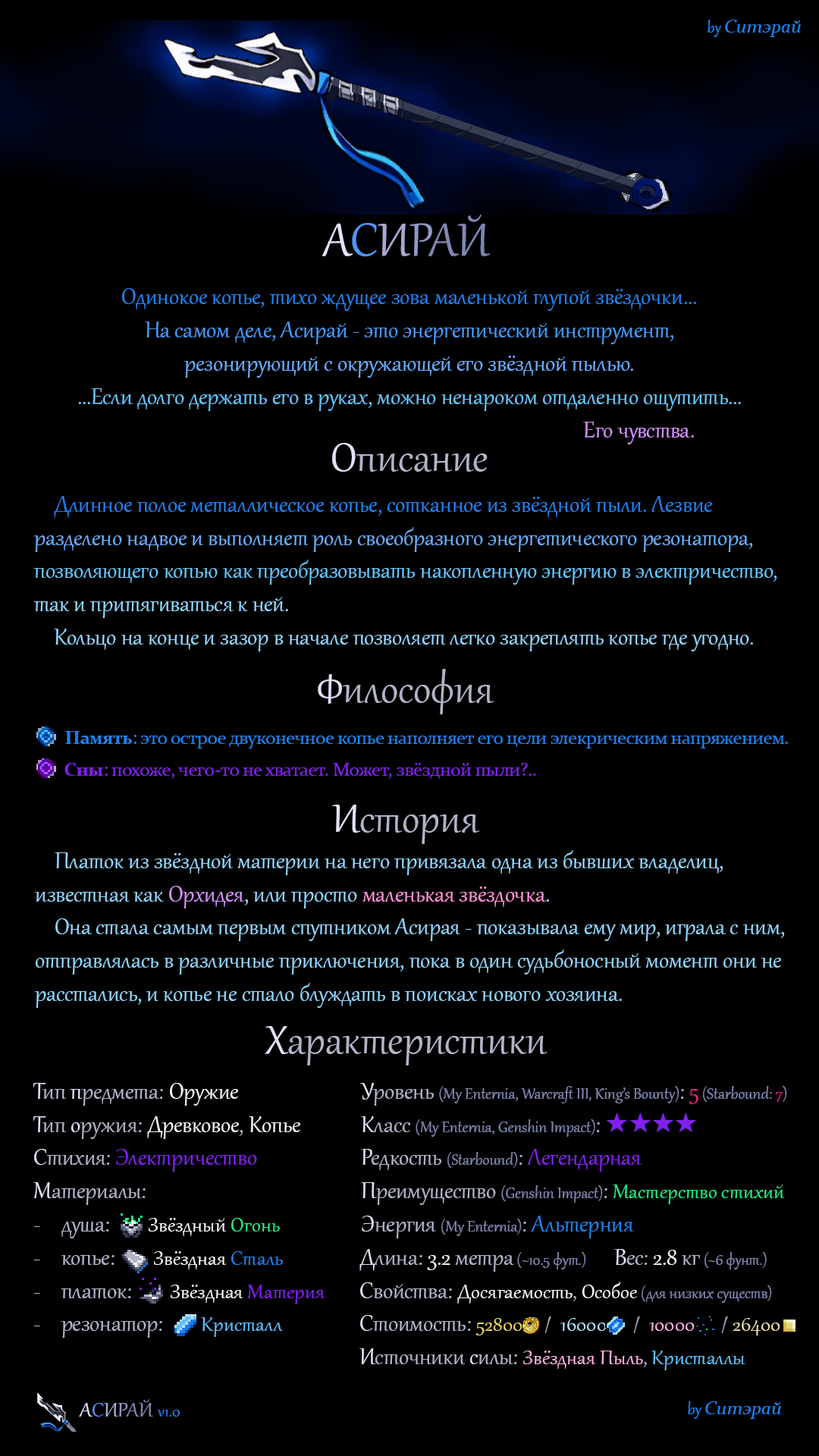
<style>
.page{position:relative;width:819px;height:1456px;background:#000000}
.page>*{position:absolute;margin:0}
.t1{font:19px "Constantia-Italic";color:#2080f0}
.t2{font:19px "Gabriola";color:#2080f0}
.t3{font:56.9px "Gabriola";color:#7e86b0}
.t4{font:56.9px "Gabriola";color:#e1e2fa}
.t5{font:56.9px "Gabriola";color:#5095fd}
.t6{font:56.9px "Gabriola";color:#a7a9d0}
.t7{font:56.9px "Gabriola";color:#9099c7}
.t8{font:27.7px "Gabriola";color:#65c6ff}
.t9{font:27.7px "Gabriola";color:#2080f0}
.t10{font:27.7px "Gabriola";color:#469afb}
.t11{font:27.7px "Gabriola";color:#69aefe}
.t12{font:27.7px "Gabriola";color:#d691ff}
.t13{font:49.5px "Gabriola";color:#b0b4c8}
.t14{font:49.5px "Gabriola";color:#e1e2fa}
.t15{font:27.7px "Gabriola";color:#91d6ff}
.t16{font:19px "Constantia";letter-spacing:-0.025em;color:#2080f0}
.t17{font:19px "Constantia-Bold";letter-spacing:-0.025em;color:#2080f0}
.t18{font:19px "Constantia";letter-spacing:-0.025em;color:#8020f0}
.t19{font:19px "Constantia-Bold";letter-spacing:-0.025em;color:#8020f0}
.t20{font:27.7px "Gabriola";color:#ff91d6}
.t21{font:27.7px "Gabriola";color:#b0b4c8}
.t22{font:27.7px "Gabriola";color:#e1e2fa}
.t23{font:27.7px "Gabriola";color:#f6f6f6}
.t24{font:27.7px "Gabriola";color:#8020f0}
.t25{font:25.3px "Gabriola";color:#f6f6f6}
.t26{font:25.3px "Gabriola";color:#20f080}
.t27{font:25.3px "Gabriola";color:#2080f0}
.t28{font:25.3px "Gabriola";color:#8020f0}
.t29{font:25.3px "Gabriola";color:#60c0fc}
.t30{font:19px "Gabriola";color:#7e86b0}
.t31{font:27.7px "Gabriola";color:#f02080}
.t32{font:19px "Gabriola";color:#f02080}
.t33{font:27.7px "SegoeUISymbol";color:#8020f0}
.t34{font:25.3px "Gabriola";color:#b0b4c8}
.t35{font:25.3px "Gabriola";color:#e7d55c}
.t36{font:25.3px "Gabriola";color:#b0e0fc}
.t37{font:25.3px "Gabriola";color:#fcb0e0}
.t38{font:25.3px "Gabriola";color:#eade9d}
.t39{font:20.3px "Gabriola";color:#2080f0}
.t40{font:25.3px "Gabriola";color:#e1e2fa}
.t41{font:25.3px "Gabriola";color:#5095fd}
.t42{font:25.3px "Gabriola";color:#a7a9d0}
.t43{font:25.3px "Gabriola";color:#9099c7}
.t44{font:25.3px "Gabriola";color:#7e86b0}
</style>
<div class="page">
<p class="t1" style="left:708px;top:20px;width:93px;height:17px"><span class="t2">by </span>Ситэрай</p>
<p class="t3" style="left:322px;top:215px;width:168px;height:42px"><span class="t4">А</span><span class="t5">С</span><span class="t6">И</span><span class="t7">Р</span>АЙ</p>
<p class="t8" style="left:78px;top:288px;width:663px;height:156px;text-align:center"><span class="t9">Одинокое копье, тихо ждущее зова маленькой глупой звёздочки...<br></span><span class="t10">На самом деле, Асирай - это энергетический инструмент,<br></span><span class="t11">резонирующий с окружающей его звёздной пылью.<br></span>...Если долго держать его в руках, можно ненароком отдаленно ощутить...<br>                                                                                               <span class="t12">Его чувства.</span></p>
<p class="t13" style="left:332px;top:443px;width:156px;height:29px"><span class="t14">О</span>писание</p>
<p class="t15" style="left:33px;top:496px;width:744px;height:155px"><span class="t9">    Длинное полое металлическое копье, сотканное из звёздной пыли. Лезвие<br></span><span class="t11">разделено надвое и выполняет роль своеобразного энергетического резонатора,<br></span><span class="t8">позволяющего копью как преобразовывать накопленную энергию в электричество,<br></span>так и притягиваться к ней.<br>    Кольцо на конце и зазор в начале позволяет легко закреплять копье где угодно.</p>
<p class="t13" style="left:318px;top:669px;width:176px;height:45px"><span class="t14">Ф</span>илософия</p>
<p class="t16" style="left:65px;top:731px;width:723px;height:17px"><span class="t17">Память</span>: это острое двуконечное копье наполняет его цели элекрическим напряжением.</p>
<p class="t18" style="left:64px;top:763px;width:472px;height:16px"><span class="t19">Сны</span>: похоже, чего-то не хватает. Может, звёздной пыли?..</p>
<p class="t13" style="left:332px;top:805px;width:148px;height:39px"><span class="t14">И</span>стория</p>
<p class="t15" style="left:34px;top:850px;width:751px;height:158px"><span class="t9">    </span>Платок из звёздной материи на него привязала одна из бывших владелиц,<br>известная как <span class="t12">Орхидея</span>, или просто <span class="t20">маленькая звёздочка</span>.<br>    Она стала самым первым спутником Асирая - показывала ему мир, играла с ним,<br>отправлялась в различные приключения, пока в один судьбоносный момент они не<br>расстались, и копье не стало блуждать в поисках нового хозяина.</p>
<p class="t13" style="left:265px;top:1026px;width:283px;height:39px"><span class="t14">Х</span>арактеристики</p>
<p class="t21" style="left:33px;top:1083px;width:292px;height:255px"><span class="t22">Т</span>ип <span class="t22">п</span>редмета: <span class="t23">Оружие<br></span><span class="t22">Т</span>ип <span class="t22">о</span>ружия: <span class="t23">Древковое</span>, <span class="t23">Копье<br></span><span class="t22">С</span>тихия: <span class="t24">Электричество<br></span><span class="t22">М</span>атериалы:<br>душа:        <span class="t25">Звёздный </span><span class="t26">Огонь<br></span>копье:        <span class="t25">Звёздная </span><span class="t27">Сталь<br></span>платок:        <span class="t25">Звёздная </span><span class="t28">Материя<br></span>резонатор:        <span class="t29">Кристалл</span></p>
<p class="t30" style="left:360px;top:1083px;width:427px;height:155px"><span class="t22">У</span><span class="t21">ровень </span>(My Enternia, Warcraft III, King’s Bounty)<span class="t21">: </span><span class="t31">5</span> (Starbound: <span class="t32">7</span>)<br><span class="t22">К</span><span class="t21">ласс </span>(My Enternia, Genshin Impact)<span class="t21">: </span><span class="t33">★★★★<br></span><span class="t22">Р</span><span class="t21">едкость </span>(Starbound)<span class="t21">: </span><span class="t24">Легендарная<br></span><span class="t22">П</span><span class="t21">реимущество </span>(Genshin Impact)<span class="t21">: </span><span class="t26">Мастерство стихий<br></span><span class="t22">Э</span><span class="t21">нергия </span>(My Enternia)<span class="t21">:</span><span class="t9"> Альтерния</span></p>
<p class="t30" style="left:359px;top:1249px;width:421px;height:121px"><span class="t22">Д</span><span class="t21">лина: </span><span class="t23">3.2</span><span class="t21"> метра</span> (~10.5 фут.)        <span class="t22">В</span><span class="t21">ес: </span><span class="t23">2.8</span><span class="t21"> кг</span> (~6 фунт.)<br><span class="t22">С</span><span class="t21">войства: </span><span class="t25">Досягаемость</span><span class="t34">, </span><span class="t25">Особое</span> (для низких существ)<br><span class="t22">С</span><span class="t21">тоимость: </span><span class="t35">52800 </span><span class="t34">    /  </span><span class="t36">16000</span><span class="t34">      /  </span><span class="t37">10000      </span><span class="t34">/ </span><span class="t38">26400<br></span><span class="t22">И</span><span class="t21">сточники </span><span class="t22">с</span><span class="t21">илы: </span><span class="t37">Звёздная Пыль</span><span class="t34">, </span><span class="t29">Кристаллы</span></p>
<p class="t39" style="left:79px;top:1399px;width:101px;height:18px"><span class="t40">А</span><span class="t41">С</span><span class="t42">И</span><span class="t43">Р</span><span class="t44">АЙ </span>v1.0</p>
<p class="t1" style="left:688px;top:1401px;width:93px;height:18px"><span class="t2">by </span>Ситэрай</p>
</div>
